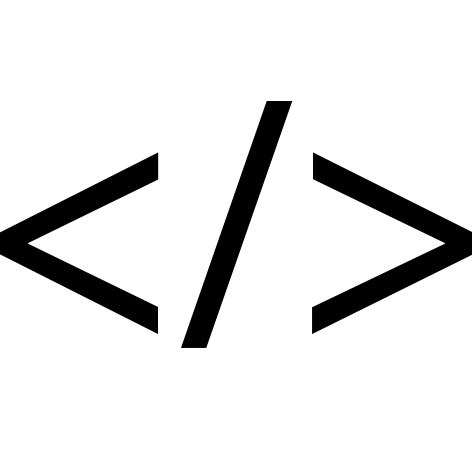
<style>
.page{position:relative;width:473px;height:473px;background:#ffffff}
.page>*{position:absolute;margin:0}
.t1{font:300px "AdobeHeitiStd-Regular";color:#000000}
</style>
<div class="page">
<p class="t1" style="left:0px;top:101px;width:472px;height:247px">&lt;/&gt;</p>
</div>
